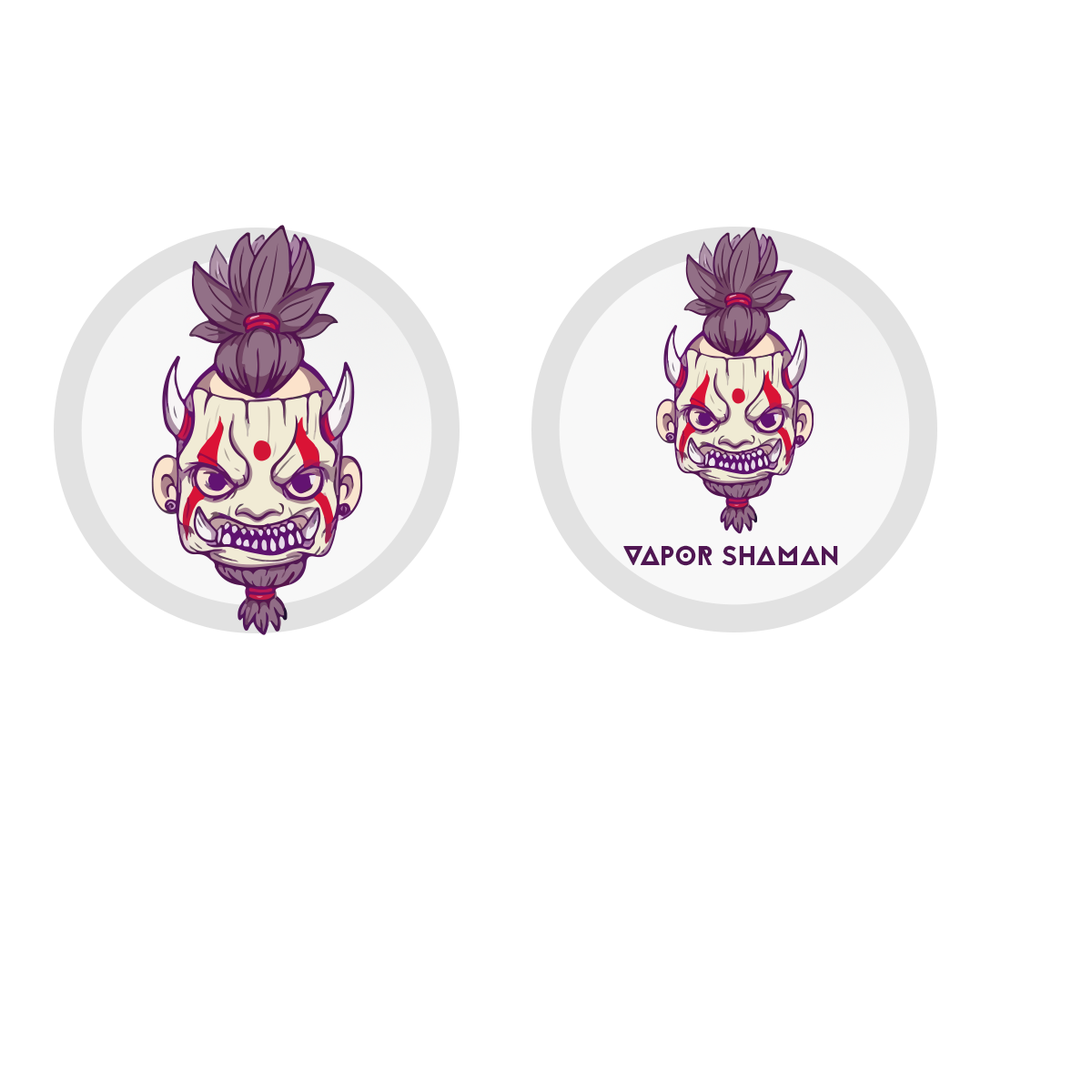
<style>
.page{position:relative;width:1092px;height:1092px;background:#ffffff}
.page>*{position:absolute;margin:0}
.t1{font:27.3px "Jaapokkienchance-Regular";color:#501653}
</style>
<div class="page">
<p class="t1" style="left:623px;top:545px;width:215px;height:21px">VAPOR SHAMAN</p>
</div>
